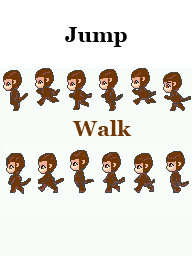
<style>
.page{position:relative;width:192px;height:256px;background:#f8fcf8}
.page>*{position:absolute;margin:0}
.t1{font:21.4px "Georgia-Bold";color:#000000}
.t2{font:21.4px "Georgia-Bold";color:#703800}
</style>
<div class="page">
<p class="t1" style="left:65px;top:27px;width:62px;height:20px">Jump</p>
<p class="t2" style="left:72px;top:120px;width:59px;height:16px">Walk</p>
</div>
